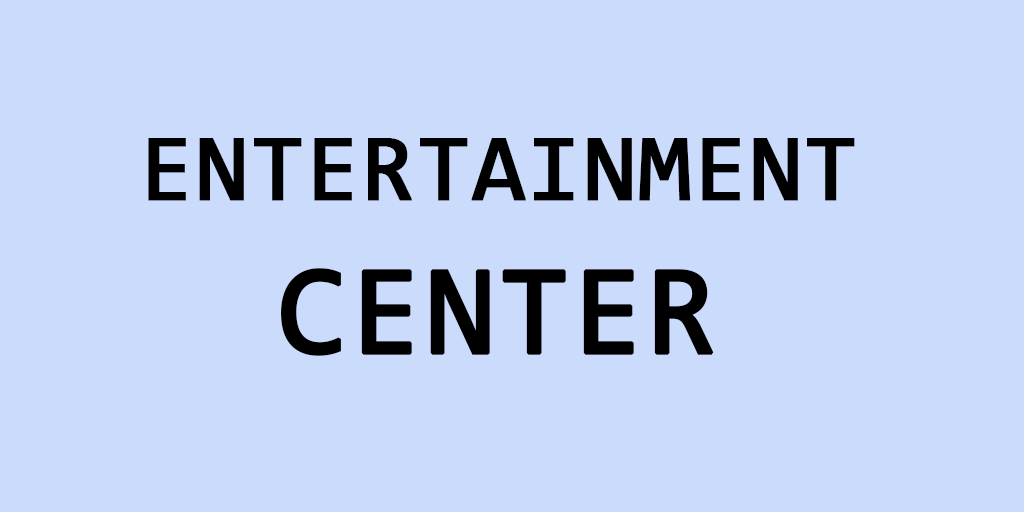
<style>
.page{position:relative;width:1024px;height:512px;background:#cbdbfc}
.page>*{position:absolute;margin:0}
.t1{font:96px "Consolas";color:#000000;font-weight:bold}
.t2{font:128px "Consolas";color:#000000;font-weight:bold}
</style>
<div class="page">
<p class="t1" style="left:148px;top:138px;width:707px;height:218px;text-align:center">ENTERTAINMENT<br><span class="t2">CENTER</span></p>
</div>
